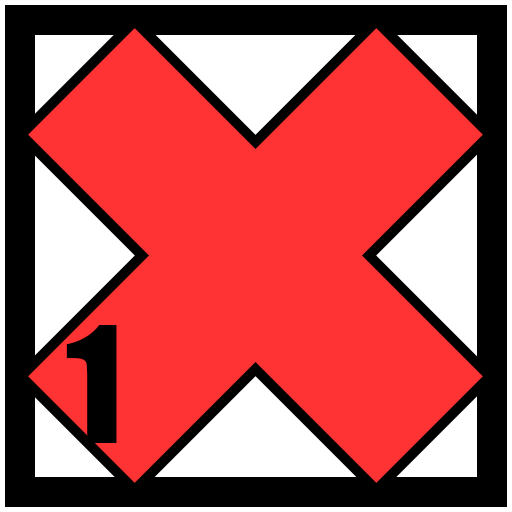
<style>
.page{position:relative;width:512px;height:512px;background:#ff3333}
.page>*{position:absolute;margin:0}
.t1{font:149.3px "Impact";letter-spacing:0.15em;color:#000000}
</style>
<div class="page">
<p class="t1" style="left:66px;top:325px;width:51px;height:118px">1</p>
</div>
